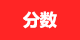
<style>
.page{position:relative;width:80px;height:40px;background:#ff2525}
.page>*{position:absolute;margin:0}
.t1{font:18px "FZLTCHK--GBK1-0";letter-spacing:-0.06em;color:#ffffff}
</style>
<div class="page">
<p class="t1" style="left:23px;top:11px;width:34px;height:18px">分数</p>
</div>
